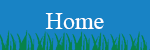
<style>
.page{position:relative;width:150px;height:50px;background:#1883c5}
.page>*{position:absolute;margin:0}
.t1{font:24px "TimesNewRomanPSMT";color:#ffffff}
</style>
<div class="page">
<p class="t1" style="left:45px;top:13px;width:59px;height:16px">Home</p>
</div>
